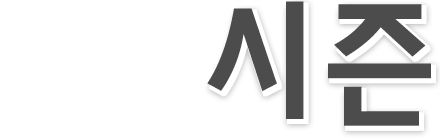
<style>
.page{position:relative;width:440px;height:140px;background:#ffffff}
.page>*{position:absolute;margin:0}
.t1{font:133.3px "KBIZgoH";letter-spacing:0.05em;color:#4c4c4c;text-transform:uppercase}
</style>
<div class="page">
<p class="t1" style="left:207px;top:1px;width:224px;height:125px">시즌</p>
</div>
